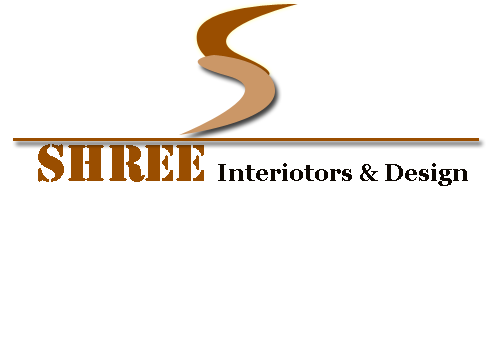
<style>
.page{position:relative;width:490px;height:342px;background:#ffffff}
.page>*{position:absolute;margin:0}
.t1{font:24px "Georgia-Bold";color:#0d0702}
.t2{font:48px "StencilStd";color:#9a4e00}
</style>
<div class="page">
<p class="t1" style="left:38px;top:144px;width:430px;height:42px"><span class="t2">SHREE </span>Interiotors &amp; Design</p>
</div>
